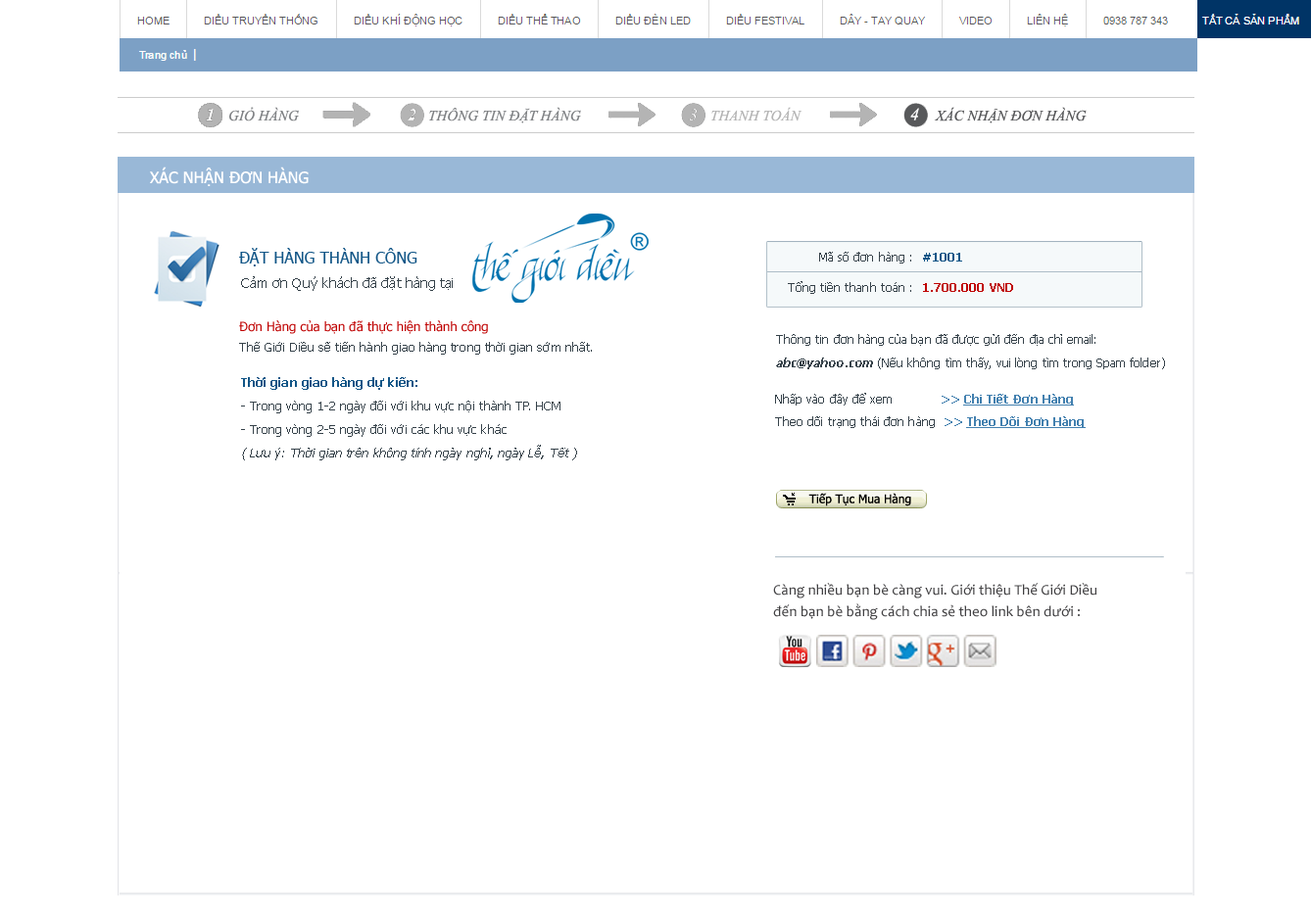
<style>
.page{position:relative;width:1311px;height:909px;background:#ffffff}
.page>*{position:absolute;margin:0}
.t1{font:14.7px "TimesNewRomanPS-ItalicMT";letter-spacing:0.005em;color:#808285}
.t2{font:14.7px "TimesNewRomanPS-ItalicMT";letter-spacing:0.005em;color:#b4b4b4}
.t3{font:17.6px "TimesNewRomanPS-ItalicMT";letter-spacing:0.005em;color:#ffffff}
.t4{font:14.7px "TimesNewRomanPS-ItalicMT";letter-spacing:0.005em;color:#58595b}
.t5{font:15.7px "Tahoma";letter-spacing:0.005em;color:#ffffff}
.t6{font:15.7px "Tahoma";letter-spacing:0.005em;color:#125687}
.t7{font:11.8px "Tahoma";letter-spacing:0.005em;color:#36424a}
.t8{font:11.8px "Tahoma-Bold";letter-spacing:0.005em;color:#125687}
.t9{font:13.7px "Tahoma";letter-spacing:0.005em;color:#36424a}
.t10{font:11.8px "Tahoma-Bold";letter-spacing:0.005em;color:#bf0000}
.t11{font:12.7px "Tahoma";letter-spacing:0.005em;color:#bf0000}
.t12{font:11.8px/23.5px "Tahoma";letter-spacing:0.005em;color:#36424a}
.t13{font:11.8px/23.5px "Tahoma-Bold";letter-spacing:0.005em;color:#36424a;font-style:italic}
.t14{font:12.7px "Tahoma";letter-spacing:0.005em;color:#36424a}
.t15{font:12.7px/23.5px "Tahoma";letter-spacing:0.005em;color:#36424a}
.t16{font:12.7px/23.5px "Tahoma-Bold";letter-spacing:0.005em;color:#125687}
.t17{font:12.7px/23.5px "Tahoma";letter-spacing:0.005em;color:#36424a;font-style:italic}
.t18{font:11.8px "Tahoma-Bold";letter-spacing:0.005em;color:#4280af}
.t19{font:11.8px "Tahoma-Bold";letter-spacing:0.005em;color:#4280af;text-decoration:underline}
.t20{font:14.7px/21.6px "Candara";letter-spacing:0.005em;color:#414042}
</style>
<div class="page">
<p class="t1" style="left:229px;top:107px;width:70px;height:15px">GIỎ HÀNG</p>
<p class="t1" style="left:429px;top:107px;width:152px;height:16px">THÔNG TIN ĐẶT HÀNG</p>
<p class="t2" style="left:711px;top:107px;width:92px;height:15px">THANH TOÁN</p>
<p class="t3" style="left:910px;top:108px;width:9px;height:13px">4</p>
<p class="t4" style="left:934px;top:107px;width:153px;height:16px">XÁC NHẬN ĐƠN HÀNG</p>
<p class="t5" style="left:150px;top:167px;width:159px;height:19px">XÁC NHẬN ĐƠN HÀNG</p>
<p class="t6" style="left:239px;top:248px;width:178px;height:19px">ĐẶT HÀNG THÀNH CÔNG</p>
<p class="t7" style="left:819px;top:252px;width:92px;height:12px">Mã số đơn hàng :</p>
<p class="t8" style="left:923px;top:253px;width:39px;height:9px">#1001</p>
<p class="t9" style="left:241px;top:276px;width:212px;height:15px">Cảm ơn Quý khách đã đặt hàng tại</p>
<p class="t7" style="left:788px;top:281px;width:123px;height:13px">Tổng tiền thanh toán :</p>
<p class="t10" style="left:923px;top:283px;width:90px;height:9px">1.700.000 VND</p>
<p class="t11" style="left:239px;top:320px;width:249px;height:14px">Đơn Hàng của bạn đã thực hiện thành công</p>
<p class="t12" style="left:776px;top:334px;width:389px;height:35px">Thông tin đơn hàng của bạn đã được gửi đến địa chỉ email: <br><span class="t13">abc@yahoo.com </span>(Nếu không tìm thấy, vui lòng tìm trong Spam folder)</p>
<p class="t14" style="left:239px;top:342px;width:353px;height:13px">Thế Giới Diều sẽ tiến hành giao hàng trong thời gian sớm nhất.</p>
<p class="t15" style="left:241px;top:377px;width:336px;height:84px"><span class="t16">Thời gian giao hàng dự kiến:<br></span>- Trong vòng 1-2 ngày đối với khu vực nội thành TP. HCM<br>- Trong vòng 2-5 ngày đối với các khu vực khác<br><span class="t17">( Lưu ý: Thời gian trên không tính ngày nghỉ, ngày Lễ, Tết )</span></p>
<p class="t7" style="left:775px;top:393px;width:299px;height:13px">Nhấp vào đây để xem<span class="t18">            &gt;&gt; </span><span class="t19">Chi Tiết Đơn Hàng</span></p>
<p class="t7" style="left:775px;top:416px;width:311px;height:12px">Theo dõi trạng thái đơn hàng  <span class="t18">&gt;&gt; </span><span class="t19">Theo Dõi Đơn Hàng</span></p>
<p class="t20" style="left:773px;top:583px;width:325px;height:37px">Càng nhiều bạn bè càng vui. Giới thiệu Thế Giới Diều<br>đến bạn bè bằng cách chia sẻ theo link bên dưới :</p>
</div>
